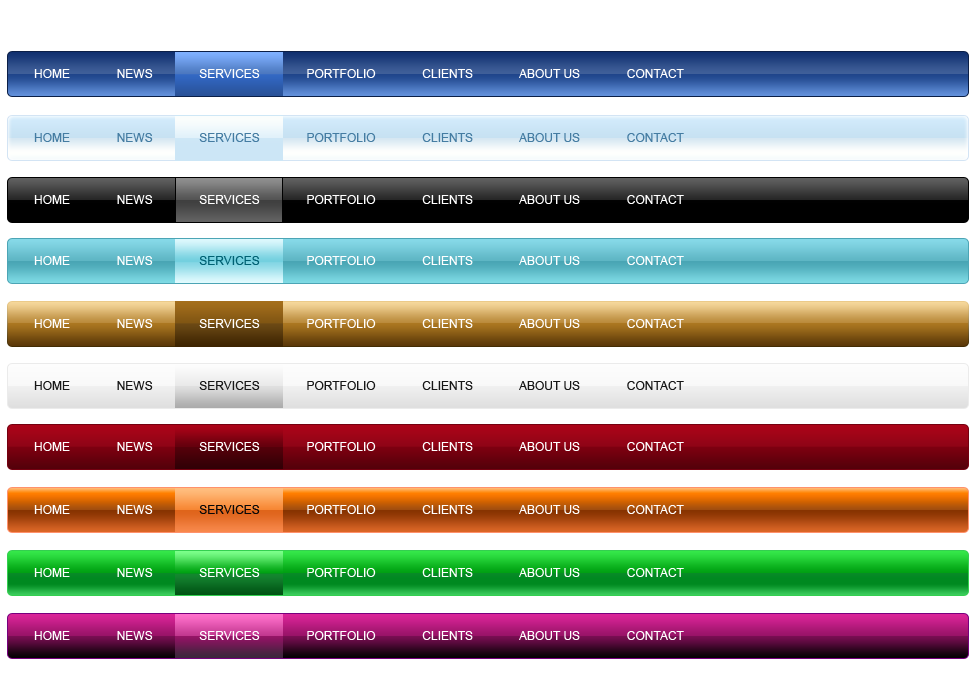
<style>
.page{position:relative;width:978px;height:683px;background:#ffffff}
.page>*{position:absolute;margin:0}
.t1{font:12px "ArialMT";color:#ffffff;text-transform:uppercase}
.t2{font:12px "ArialMT";color:#447ca2;text-transform:uppercase}
.t3{font:12px "ArialMT";color:#006173;text-transform:uppercase}
.t4{font:12px "ArialMT";color:#171717;text-transform:uppercase}
.t5{font:12px "ArialMT";color:#080808;text-transform:uppercase}
</style>
<div class="page">
<p class="t1" style="left:34px;top:69px;width:650px;height:9px">Home              News              Services              Portfolio              Clients              About Us              Contact</p>
<p class="t2" style="left:34px;top:133px;width:650px;height:9px">Home              News              Services              Portfolio              Clients              About Us              Contact</p>
<p class="t1" style="left:34px;top:195px;width:650px;height:9px">Home              News              Services              Portfolio              Clients              About Us              Contact</p>
<p class="t1" style="left:34px;top:256px;width:650px;height:9px">Home              News              <span class="t3">Services</span>              Portfolio              Clients              About Us              Contact</p>
<p class="t1" style="left:34px;top:319px;width:650px;height:9px">Home              News              Services              Portfolio              Clients              About Us              Contact</p>
<p class="t4" style="left:34px;top:381px;width:650px;height:9px">Home              News              Services              Portfolio              Clients              About Us              Contact</p>
<p class="t1" style="left:34px;top:442px;width:650px;height:9px">Home              News              Services              Portfolio              Clients              About Us              Contact</p>
<p class="t1" style="left:34px;top:505px;width:650px;height:9px">Home              News              <span class="t5">Services</span>              Portfolio              Clients              About Us              Contact</p>
<p class="t1" style="left:34px;top:568px;width:650px;height:9px">Home              News              Services              Portfolio              Clients              About Us              Contact</p>
<p class="t1" style="left:34px;top:631px;width:650px;height:9px">Home              News              Services              Portfolio              Clients              About Us              Contact</p>
</div>
